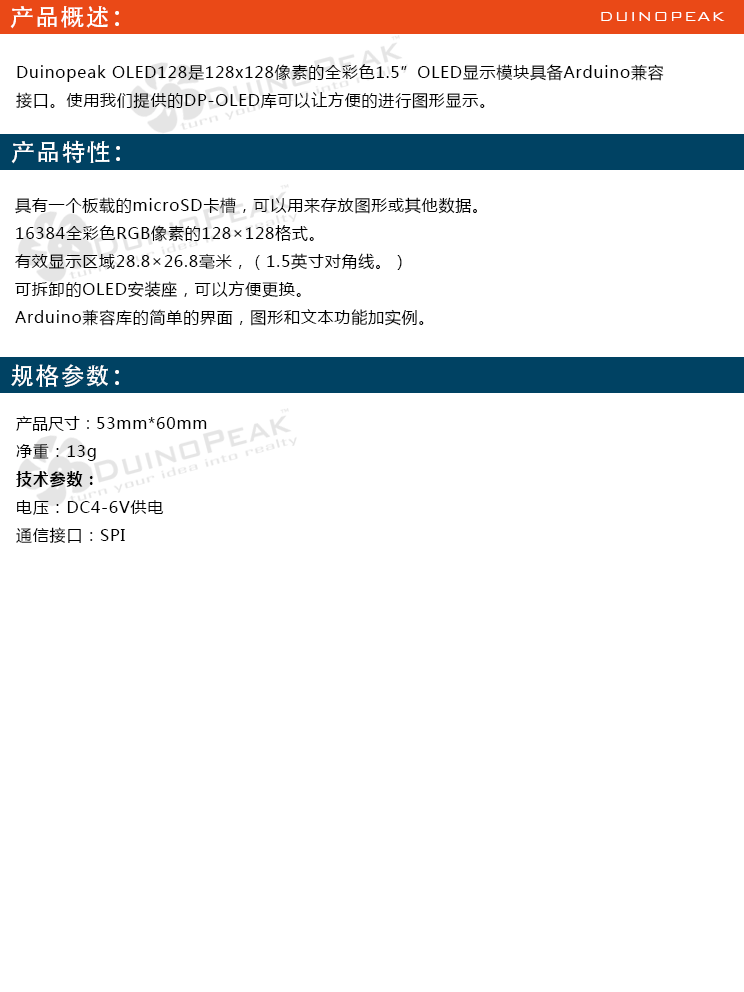
<style>
.page{position:relative;width:744px;height:992px;background:#ffffff}
.page>*{position:absolute;margin:0}
.t1{font:24px "AdobeHeitiStd-Regular";letter-spacing:0.05em;color:#ffffff}
.t2{font:18px "BankGothicBT-Light";letter-spacing:0.05em;color:#ffffff}
.t3{font:16px "MicrosoftYaHei";letter-spacing:0.05em;color:#000000}
.t4{font:16px "MicrosoftYaHei";color:#000000}
.t5{font:16px "MicrosoftYaHei-Bold";letter-spacing:0.05em;color:#000000}
</style>
<div class="page">
<p class="t1" style="left:10px;top:6px;width:109px;height:23px">产品概述：</p>
<p class="t2" style="left:601px;top:12px;width:124px;height:9px">DUINOPEAK</p>
<p class="t3" style="left:16px;top:64px;width:648px;height:45px">Duinopeak OLED128是128x128像素的全彩色1.5”OLED显示模块具备Arduino兼容<br>接口。使用我们提供的DP-OLED库可以让方便的进行图形显示。</p>
<p class="t1" style="left:11px;top:140px;width:109px;height:24px">产品特性：</p>
<p class="t3" style="left:15px;top:197px;width:462px;height:129px">具有一个板载的microSD卡槽，可以用来存放图形或其他数据。<br>16384全彩色RGB像素的128×128格式。<br>有效显示区域28.8×26.8毫米，（1.5英寸对角线。）<br>可拆卸的OLED安装座，可以方便更换。<br>Arduino兼容库的简单的界面，图形和文本功能加实例。</p>
<p class="t1" style="left:11px;top:364px;width:108px;height:23px">规格参数：</p>
<p class="t3" style="left:16px;top:416px;width:191px;height:127px"><span class="t4">产品尺寸：</span>53mm*60mm<br>净重：13g<br><span class="t5">技术参数：<br></span>电压：DC4-6V供电<br>通信接口：SPI</p>
</div>
